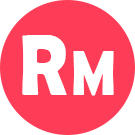
<style>
.page{position:relative;width:135px;height:135px;background:#fd3d57}
.page>*{position:absolute;margin:0}
.t1{font:87.1px "BerlinSansFBDemi-Bold";color:#ffffff;scale:0.87 1}
.t2{font:63.6px "BerlinSansFBDemi-Bold";color:#ffffff;scale:0.87 1}
</style>
<div class="page">
<p class="t1" style="left:22px;top:35px;width:92px;height:61px">R <span class="t2">M</span></p>
</div>
